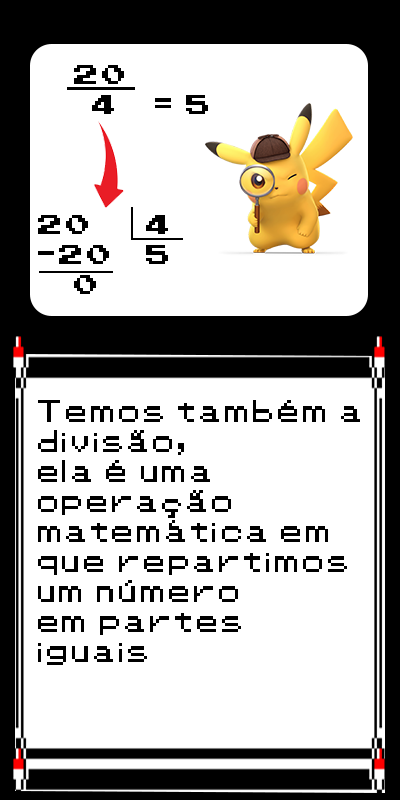
<style>
.page{position:relative;width:400px;height:800px;background:#ffffff}
.page>*{position:absolute;margin:0}
.t1{font:25px "Pokemon-Classic";color:#000000}
</style>
<div class="page">
<p class="t1" style="left:38px;top:65px;width:170px;height:229px">20<br>   4  = 5<br><br><br><br>20   4<br>-20  5<br> 0</p>
<p class="t1" style="left:38px;top:400px;width:322px;height:265px">Temos também a<br>divisão,<br>ela é uma <br>operação <br>matemática em <br>que repartimos <br>um número <br>em partes <br>iguais</p>
</div>
